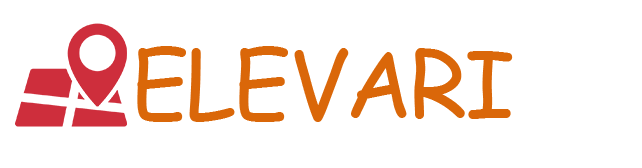
<style>
.page{position:relative;width:642px;height:168px;background:#ffffff}
.page>*{position:absolute;margin:0}
.t1{font:92.4px "ComicSansMS";letter-spacing:-0.04em;color:#da6709;text-transform:uppercase}
</style>
<div class="page">
<p class="t1" style="left:137px;top:46px;width:376px;height:76px">elevari</p>
</div>
